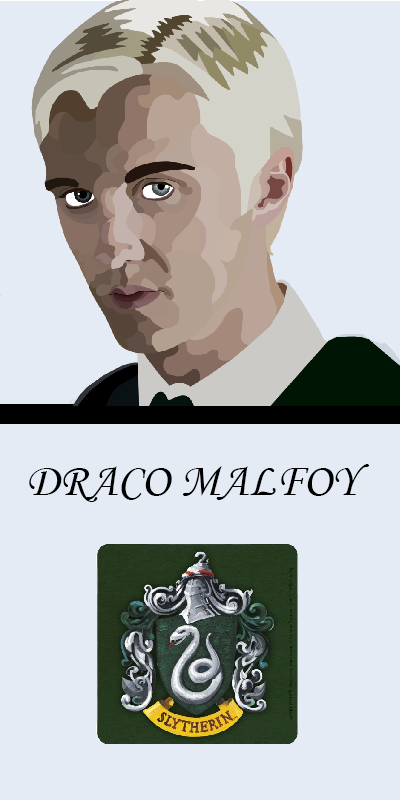
<style>
.page{position:relative;width:400px;height:800px;background:#e4ebf5}
.page>*{position:absolute;margin:0}
.t1{font:47px "MonotypeCorsiva";color:#000000}
</style>
<div class="page">
<p class="t1" style="left:29px;top:464px;width:340px;height:38px">DRACO MALFOY</p>
</div>
